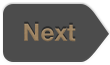
<style>
.page{position:relative;width:110px;height:65px;background:#4c4c4c}
.page>*{position:absolute;margin:0}
.t1{font:24px "HelveticaNeue-Bold";color:#a58c69}
</style>
<div class="page">
<p class="t1" style="left:24px;top:23px;width:52px;height:19px">Next</p>
</div>
